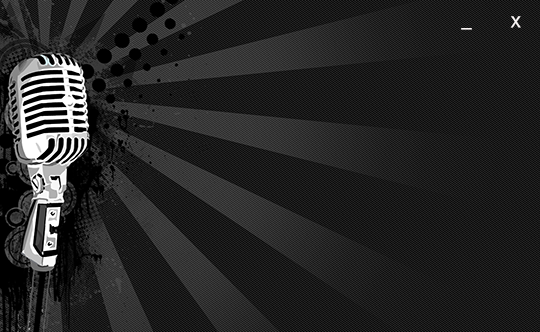
<style>
.page{position:relative;width:540px;height:332px}
.page>*{position:absolute;margin:0}
.t1{font:24px "Raavi";color:#fbf7f7}
.t2{font:24px "Raavi";color:#fbf7f7;scale:1.63 1}
</style>
<div class="page">
<p class="t1" style="left:510px;top:16px;width:11px;height:12px">x</p>
<p class="t2" style="left:461px;top:28px;width:11px;height:2px">-</p>
</div>
